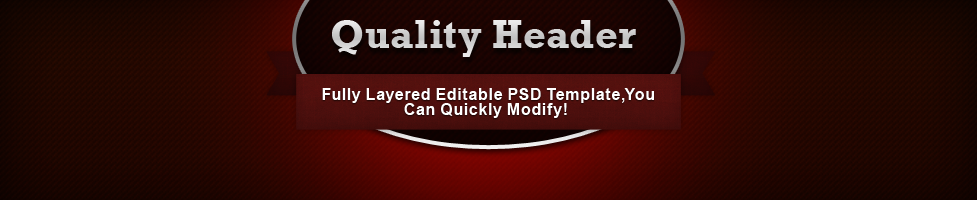
<style>
.page{position:relative;width:977px;height:200px}
.page>*{position:absolute;margin:0}
.t1{font:40.4px "Rockwell-Bold";color:#d1d1d1}
.t2{font:16.1px/14.4px "Arial-BoldMT";letter-spacing:0.01em;color:#ffffff}
</style>
<div class="page">
<p class="t1" style="left:332px;top:20px;width:304px;height:37px">Quality Header</p>
<p class="t2" style="left:322px;top:88px;width:332px;height:30px;text-align:center">Fully Layered Editable PSD Template,You<br> Can Quickly Modify!</p>
</div>
